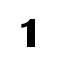
<style>
.page{position:relative;width:64px;height:64px;background:#ffffff}
.page>*{position:absolute;margin:0}
.t1{font:41.7px "BritannicBold";color:#000000}
</style>
<div class="page">
<p class="t1" style="left:21px;top:19px;width:14px;height:28px">1</p>
</div>
